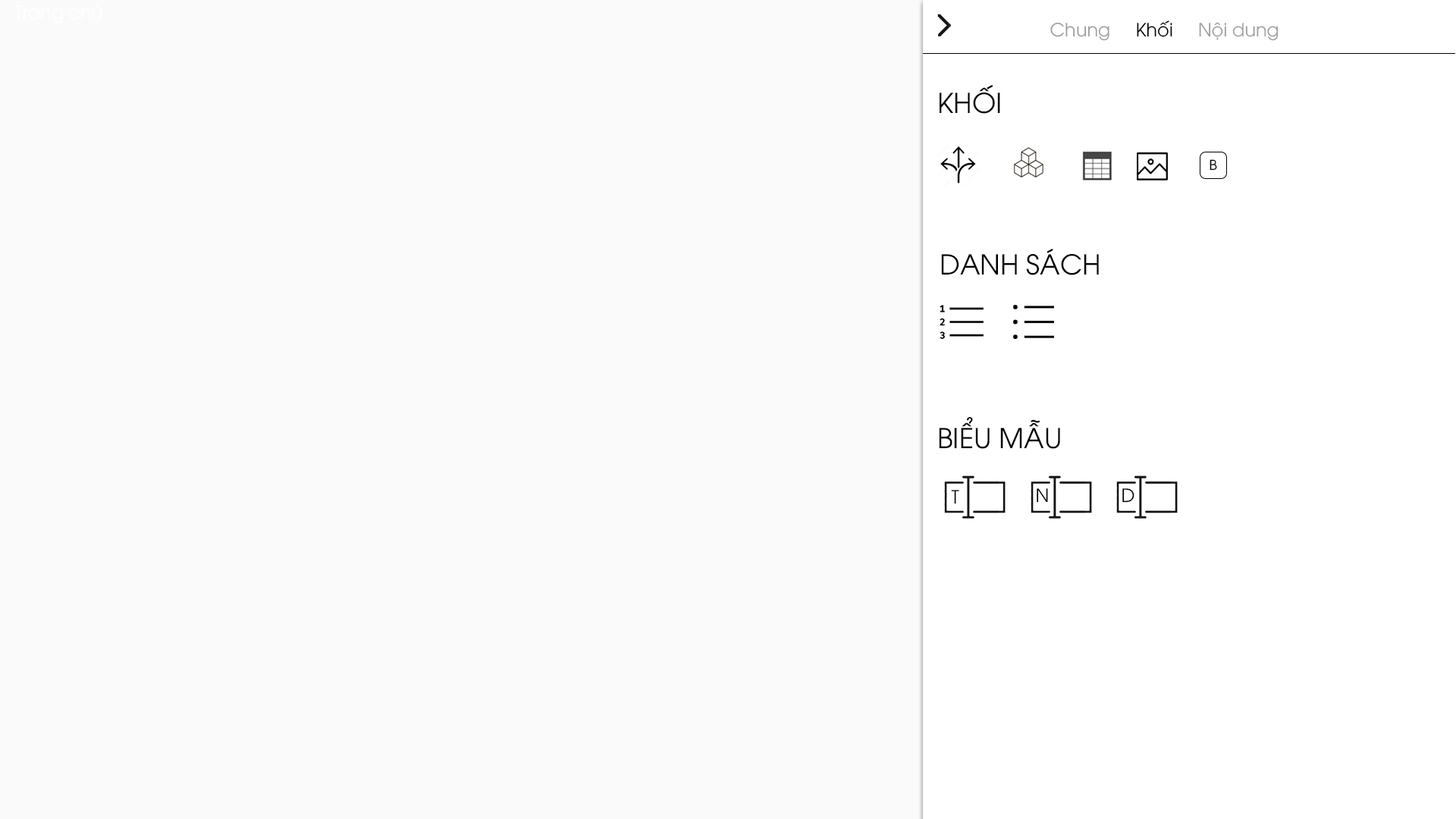
<style>
.page{position:relative;width:1456px;height:819px;background:#fafafa}
.page>*{position:absolute;margin:0}
.t1{font:18.2px "UTM-Avo";color:#9e9e9e}
.t2{font:18.2px "UTM-Avo";color:#000000}
.t3{font:18.2px "UTM-Avo";color:#9d9d9d}
.t4{font:27.3px "UTM-Avo";color:#010101}
.t5{font:13.6px "UTM-Avo";color:#000000}
.t6{font:27.3px "UTM-Avo";color:#000000}
</style>
<div class="page">
<p class="t1" style="left:1050px;top:20px;width:229px;height:21px">Chung     Khối     <span class="t2">Nội dung</span></p>
<p class="t1" style="left:1050px;top:20px;width:229px;height:21px"><span class="t3">Chung     </span><span class="t2">Khối  </span>   Nội dung</p>
<p class="t4" style="left:940px;top:85px;width:60px;height:29px">KHỐI</p>
<p class="t5" style="left:1210px;top:159px;width:7px;height:12px">B</p>
<p class="t6" style="left:941px;top:249px;width:158px;height:26px">DANH SÁCH</p>
<p class="t6" style="left:939px;top:417px;width:121px;height:32px">BIỂU MẪU</p>
<p class="t2" style="left:951px;top:490px;width:8px;height:14px">T</p>
<p class="t2" style="left:1037px;top:488px;width:11px;height:15px">N</p>
<p class="t2" style="left:1122px;top:488px;width:12px;height:15px">D</p>
</div>
